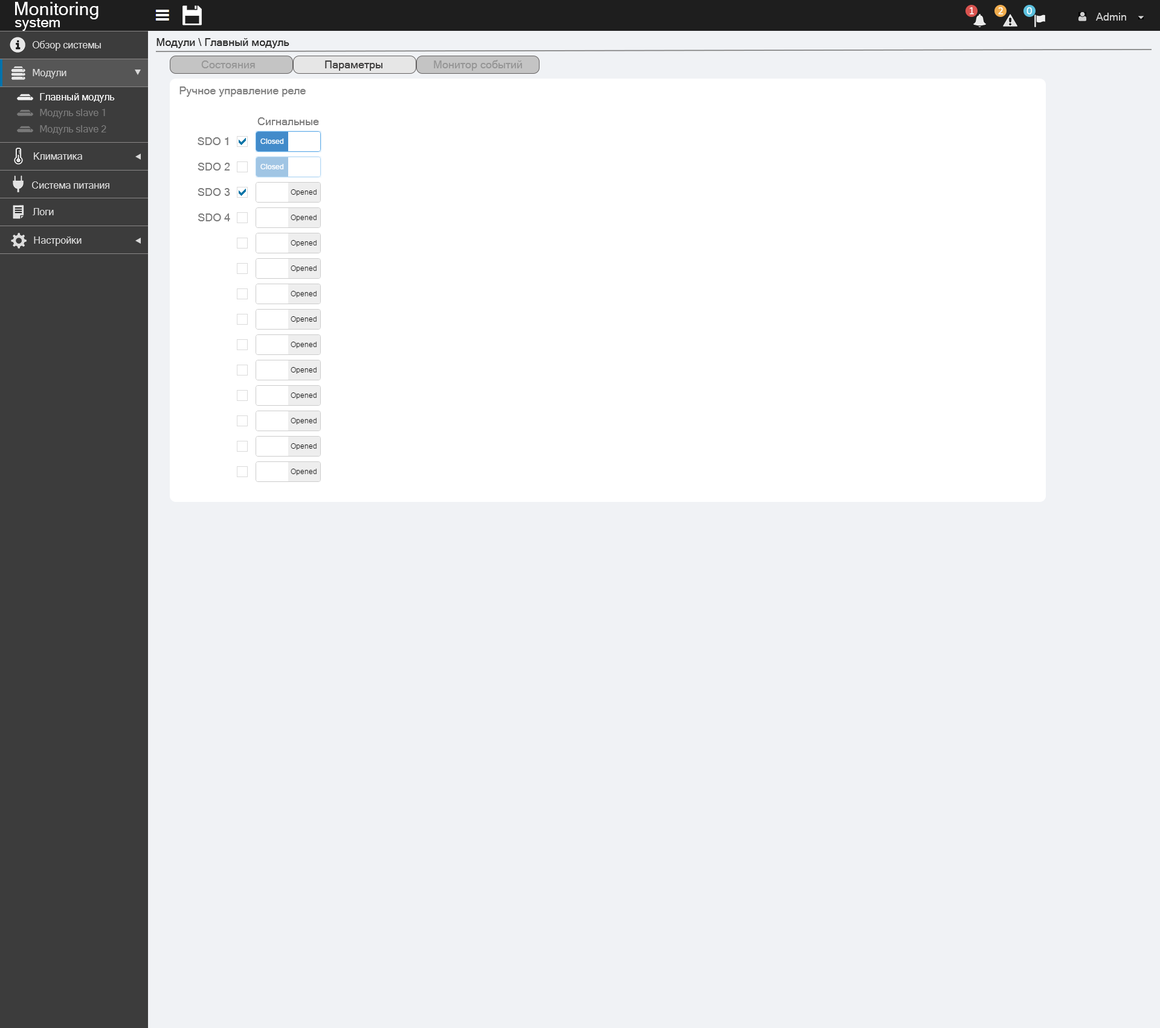
<style>
.page{position:relative;width:1160px;height:1028px;background:#f0f2f5}
.page>*{position:absolute;margin:0}
.t1{font:18.1px "MicrosoftSansSerif";color:#ffffff}
.t2{font:14.5px "MicrosoftSansSerif";color:#ffffff}
.t3{font:9.7px "MicrosoftSansSerif";color:#d9d9d9}
.t4{font:10.9px "MicrosoftSansSerif";color:#2f2f2f}
.t5{font:10.9px "MicrosoftSansSerif";color:#979797}
.t6{font:10.9px "MicrosoftSansSerif";color:#403f3f}
.t7{font:10.9px "MicrosoftSansSerif";color:#969696}
.t8{font:10.9px "MicrosoftSansSerif";color:#7e7e7e}
.t9{font:9.7px "MicrosoftSansSerif";color:#ffffff}
.t10{font:9.7px "MicrosoftSansSerif";color:#797979}
</style>
<div class="page">
<p class="t1" style="left:15px;top:2px;width:84px;height:17px">Monitoring</p>
<p class="t2" style="left:15px;top:18px;width:45px;height:13px">system</p>
<p class="t3" style="left:33px;top:40px;width:68px;height:11px">Обзор системы</p>
<p class="t4" style="left:157px;top:38px;width:133px;height:10px">Модули \ Главный модуль</p>
<p class="t5" style="left:201px;top:60px;width:54px;height:8px">Состояния</p>
<p class="t6" style="left:325px;top:60px;width:58px;height:11px">Параметры</p>
<p class="t7" style="left:434px;top:60px;width:88px;height:11px">Монитор событий</p>
<p class="t3" style="left:33px;top:69px;width:33px;height:10px">Модули</p>
<p class="t8" style="left:180px;top:86px;width:126px;height:11px">Ручное управление реле</p>
<p class="t9" style="left:40px;top:93px;width:75px;height:10px">Главный модуль</p>
<p class="t10" style="left:40px;top:109px;width:65px;height:9px">Модуль slave 1</p>
<p class="t10" style="left:40px;top:125px;width:66px;height:10px">Модуль slave 2</p>
<p class="t8" style="left:257px;top:117px;width:62px;height:8px">Сигнальные</p>
<p class="t8" style="left:198px;top:137px;width:30px;height:8px">SDO 1</p>
<p class="t3" style="left:34px;top:152px;width:48px;height:8px">Климатика</p>
<p class="t8" style="left:198px;top:163px;width:32px;height:7px">SDO 2</p>
<p class="t3" style="left:32px;top:181px;width:77px;height:8px">Система питания</p>
<p class="t8" style="left:198px;top:188px;width:32px;height:8px">SDO 3</p>
<p class="t3" style="left:33px;top:208px;width:21px;height:7px">Логи</p>
<p class="t8" style="left:198px;top:213px;width:32px;height:8px">SDO 4</p>
<p class="t3" style="left:34px;top:236px;width:48px;height:10px">Настройки</p>
</div>
